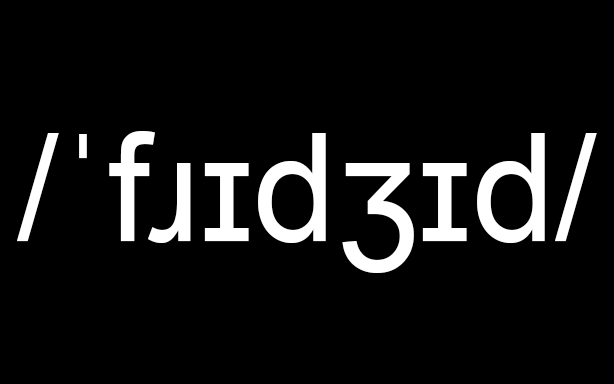
<style>
.page{position:relative;width:614px;height:384px;background:#000000}
.page>*{position:absolute;margin:0}
.t1{font:150px "ArialMT";color:#ffffff}
</style>
<div class="page">
<p class="t1" style="left:17px;top:131px;width:580px;height:142px">/ˈfɹɪdʒɪd/</p>
</div>
